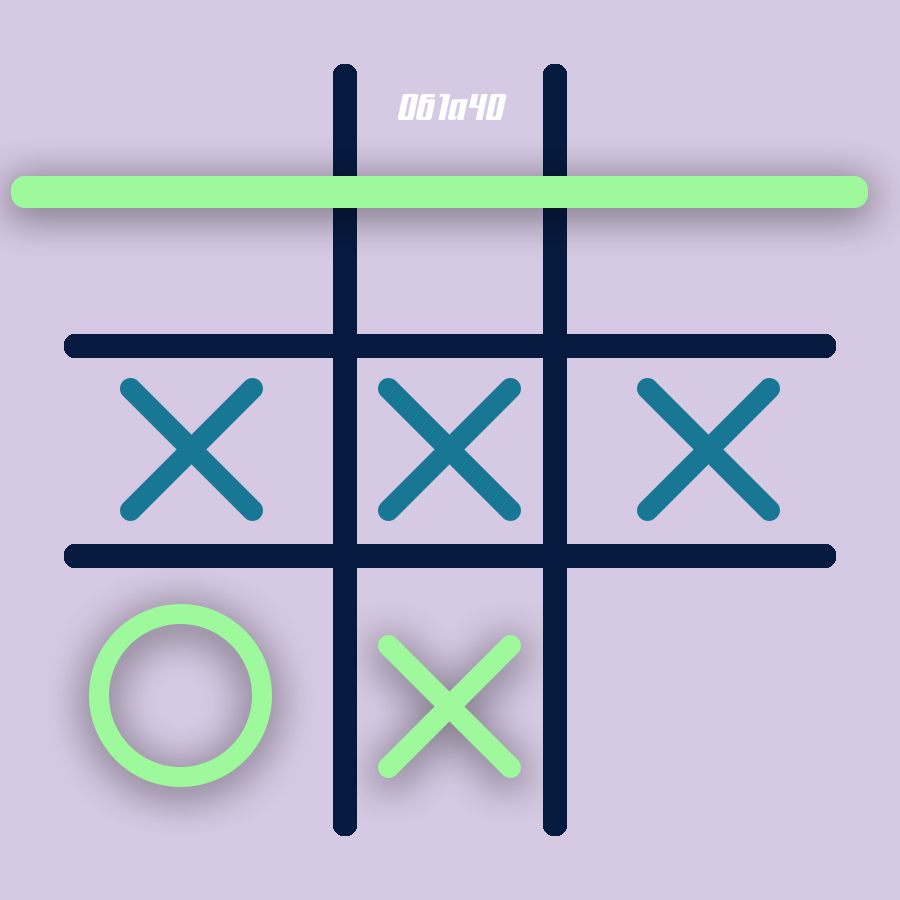
<style>
.page{position:relative;width:900px;height:900px;background:#d6c9e3}
.page>*{position:absolute;margin:0}
.t1{font:50px "SubadaiBaanCondensedItalic";color:#ffffff}
</style>
<div class="page">
<p class="t1" style="left:398px;top:94px;width:109px;height:26px">061a40</p>
</div>
